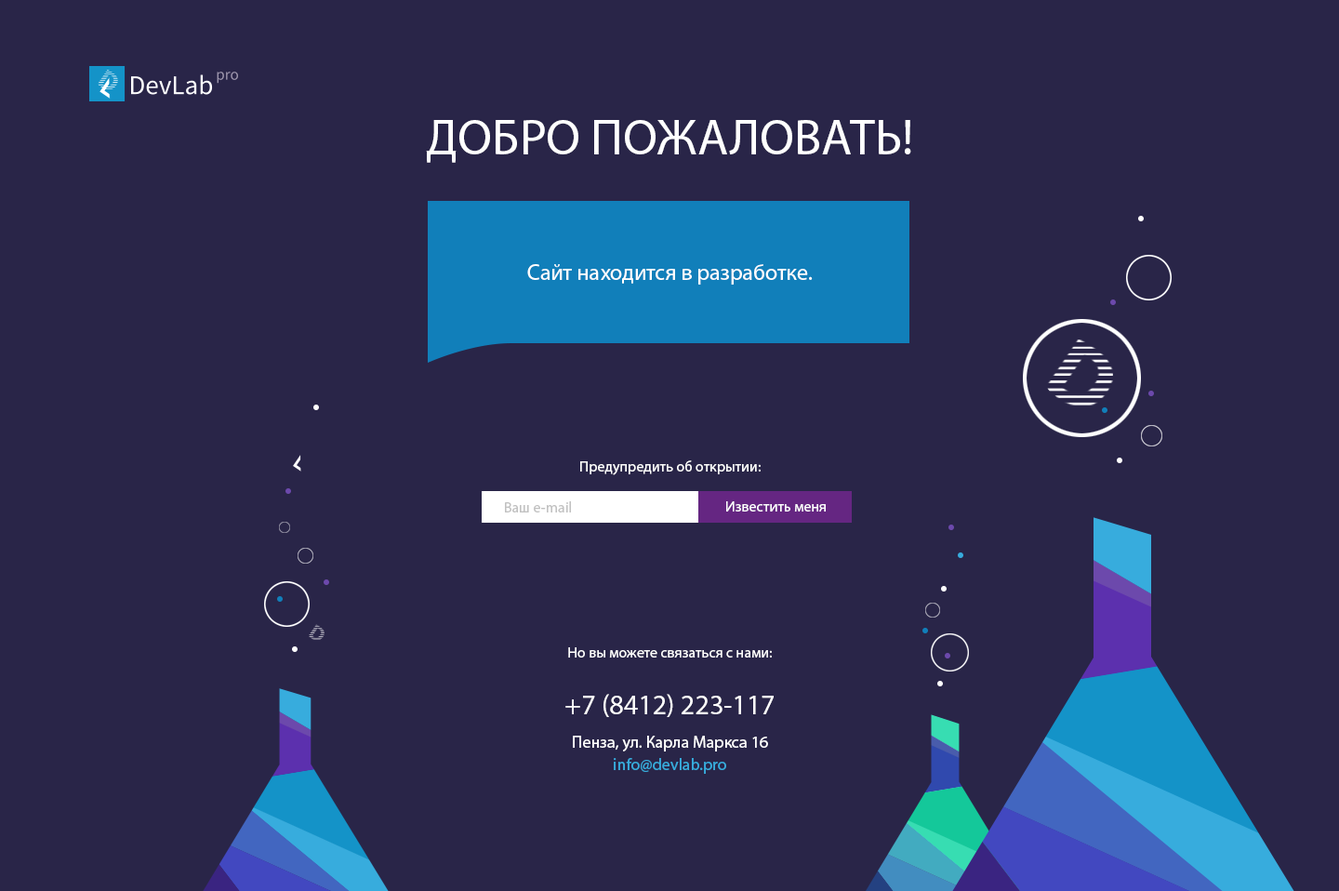
<style>
.page{position:relative;width:1339px;height:891px;background:#292548}
.page>*{position:absolute;margin:0}
.t1{font:50.2px "MyriadPro-Regular";color:#ffffff;text-transform:uppercase}
.t2{font:22.3px "MyriadPro-Regular";color:#ffffff}
.t3{font:14.9px "MyriadPro-Regular";color:#ffffff}
.t4{font:14.9px "MyriadPro-Regular";color:#c1c1c1}
.t5{font:16.7px/33.5px "MyriadPro-Regular";color:#ffffff}
.t6{font:27.9px "MyriadPro-Regular";color:#ffffff}
.t7{font:16.7px/22.3px "MyriadPro-Regular";color:#37acdd}
</style>
<div class="page">
<p class="t1" style="left:426px;top:120px;width:485px;height:43px">Добро пожаловать!</p>
<p class="t2" style="left:527px;top:264px;width:286px;height:20px">Сайт находится в разработке.</p>
<p class="t3" style="left:580px;top:460px;width:181px;height:15px">Предупредить об открытии:</p>
<p class="t4" style="left:505px;top:501px;width:66px;height:11px">Ваш e-mail</p>
<p class="t3" style="left:726px;top:501px;width:100px;height:10px">Известить меня</p>
<p class="t3" style="left:568px;top:647px;width:204px;height:10px">Но вы можете связаться с нами:</p>
<p class="t5" style="left:565px;top:694px;width:209px;height:80px;text-align:center"><span class="t6">+7 (8412) 223-117<br></span>Пенза, ул. Карла Маркса 16<br><span class="t7">info@devlab.pro</span></p>
</div>
